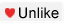
<style>
.page{position:relative;width:65px;height:25px;background:#f2f2f2}
.page>*{position:absolute;margin:0}
.t1{font:14.6px "ArialMT";letter-spacing:0.01em;color:#000000}
</style>
<div class="page">
<p class="t1" style="left:19px;top:7px;width:40px;height:12px">Unlike</p>
</div>
